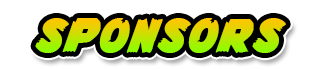
<style>
.page{position:relative;width:320px;height:70px;background:#ffffff}
.page>*{position:absolute;margin:0}
.t1{font:66px "FlyingLeatherneck";font-variant:small-caps}
</style>
<div class="page">
<p class="t1" style="left:35px;top:18px;width:251px;height:35px">SPONSORS</p>
</div>
